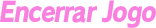
<style>
.page{position:relative;width:156px;height:28px;background:#ffffff}
.page>*{position:absolute;margin:0}
.t1{font:27.3px "RodinPro-EB";letter-spacing:-0.051em;color:#f980de;font-style:italic;scale:0.85 1}
</style>
<div class="page">
<p class="t1" style="left:0px;top:0px;width:156px;height:28px">Encerrar Jogo</p>
</div>
